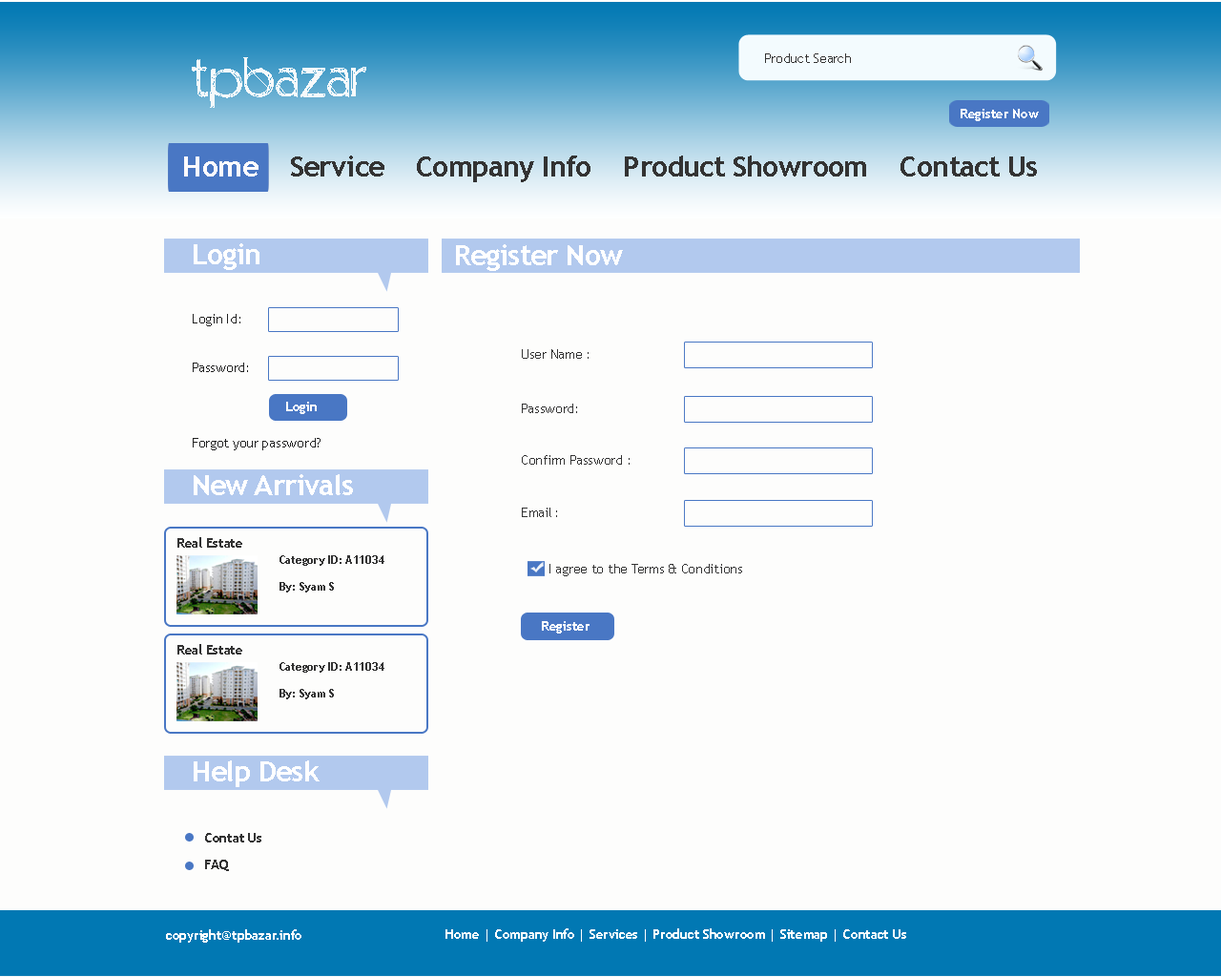
<style>
.page{position:relative;width:1221px;height:977px;background:#fdfdfc}
.page>*{position:absolute;margin:0}
.t1{font:13.4px "TrebuchetMS";letter-spacing:-0.02em;color:#333333}
.t2{font:68.7px "Positiv-A";letter-spacing:-0.02em;color:#f7f9fa}
.t3{font:13.4px "TrebuchetMS-Bold";letter-spacing:-0.02em;color:#ffffff}
.t4{font:28.6px "TrebuchetMS-Bold";letter-spacing:-0.02em;color:#333333}
.t5{font:28.6px "TrebuchetMS-Bold";letter-spacing:-0.02em;color:#fdfafc}
.t6{font:28.6px "TrebuchetMS-Bold";letter-spacing:-0.02em;color:#ffffff}
.t7{font:13.4px "TrebuchetMS";letter-spacing:-0.02em;color:#212121}
.t8{font:13.4px "TrebuchetMS-Bold";letter-spacing:-0.02em;color:#fefdfd}
.t9{font:13.4px "TrebuchetMS-Bold";letter-spacing:-0.02em;color:#333333}
.t10{font:11.4px/26.7px "TrebuchetMS-Bold";letter-spacing:-0.02em;color:#333333}
.t11{font:13.4px/26.7px "TrebuchetMS-Bold";letter-spacing:-0.02em;color:#333333}
</style>
<div class="page">
<p class="t1" style="left:765px;top:53px;width:86px;height:10px">Product Search</p>
<p class="t2" style="left:192px;top:57px;width:174px;height:51px">tpbazar</p>
<p class="t3" style="left:960px;top:109px;width:79px;height:12px">Register Now</p>
<p class="t4" style="left:184px;top:155px;width:853px;height:27px"><span class="t5">Home </span>   Service    Company Info    Product Showroom    Contact Us</p>
<p class="t6" style="left:194px;top:243px;width:65px;height:27px">Login</p>
<p class="t6" style="left:456px;top:244px;width:167px;height:27px">Register Now</p>
<p class="t7" style="left:193px;top:314px;width:47px;height:12px">Login Id:</p>
<p class="t1" style="left:522px;top:349px;width:67px;height:10px">User Name :</p>
<p class="t7" style="left:193px;top:362px;width:55px;height:10px">Password:</p>
<p class="t8" style="left:286px;top:402px;width:31px;height:12px">Login</p>
<p class="t1" style="left:522px;top:403px;width:55px;height:10px">Password:</p>
<p class="t7" style="left:193px;top:438px;width:127px;height:12px">Forgot your password?</p>
<p class="t1" style="left:522px;top:455px;width:108px;height:10px">Confirm Password :</p>
<p class="t6" style="left:194px;top:474px;width:159px;height:21px">New Arrivals</p>
<p class="t1" style="left:522px;top:507px;width:35px;height:10px">Email :</p>
<p class="t9" style="left:177px;top:537px;width:65px;height:10px">Real Estate</p>
<p class="t10" style="left:279px;top:555px;width:105px;height:37px">Category ID: A11034<br>By: Syam S</p>
<p class="t1" style="left:549px;top:564px;width:193px;height:12px">I agree to the Terms &amp; Conditions</p>
<p class="t3" style="left:542px;top:621px;width:47px;height:12px">Register</p>
<p class="t9" style="left:177px;top:644px;width:65px;height:10px">Real Estate</p>
<p class="t10" style="left:279px;top:662px;width:105px;height:37px">Category ID: A11034<br>By: Syam S</p>
<p class="t6" style="left:194px;top:760px;width:126px;height:27px">Help Desk</p>
<p class="t11" style="left:205px;top:833px;width:56px;height:38px">Contat Us<br>FAQ</p>
<p class="t3" style="left:166px;top:929px;width:135px;height:13px">copyright@tpbazar.info</p>
<p class="t3" style="left:445px;top:928px;width:461px;height:13px">Home | Company Info | Services | Product Showroom | Sitemap | Contact Us</p>
</div>
